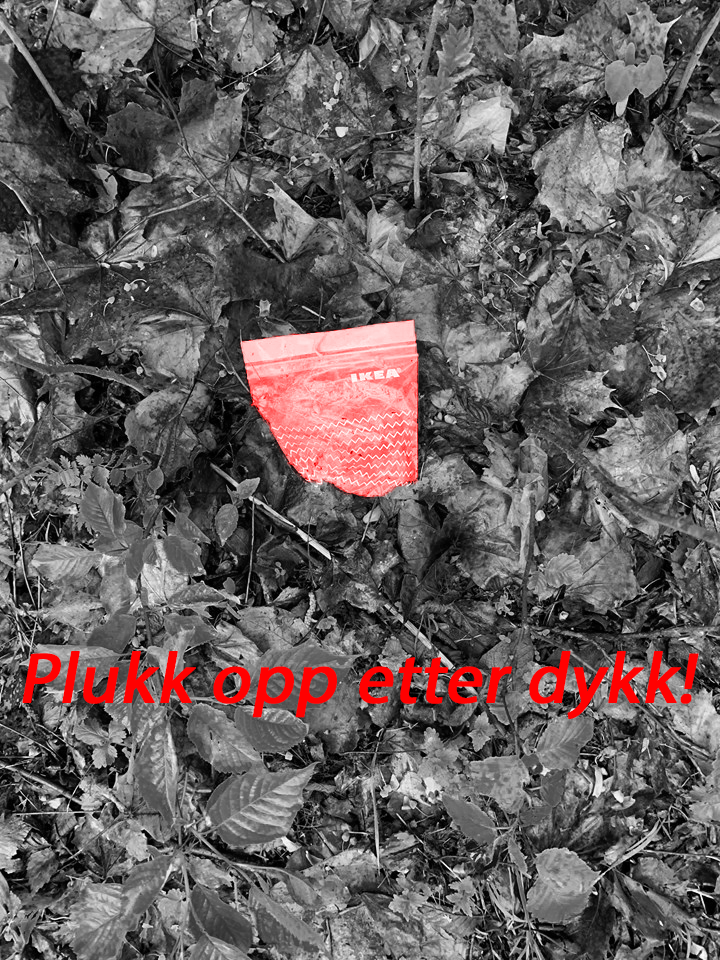
<style>
.page{position:relative;width:720px;height:960px}
.page>*{position:absolute;margin:0}
.t1{font:72px "MyriadPro-Regular";color:#ff0101;font-weight:bold;font-style:italic}
</style>
<div class="page">
<p class="t1" style="left:22px;top:651px;width:677px;height:68px">Plukk opp etter dykk!</p>
</div>
